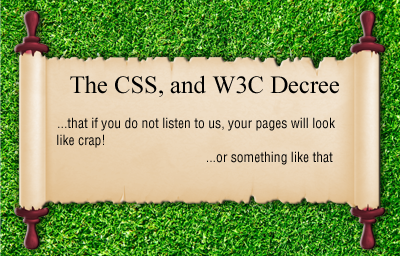
<style>
.page{position:relative;width:400px;height:256px}
.page>*{position:absolute;margin:0}
.t1{font:24.6px "TimesNewRomanPSMT";color:#000000}
.t2{font:13.6px "HelveticaLTStd-Cond";color:#000000}
</style>
<div class="page">
<p class="t1" style="left:70px;top:75px;width:269px;height:22px">The CSS, and W3C Decree</p>
<p class="t2" style="left:58px;top:117px;width:277px;height:14px">...that if you do not listen to us, your pages will look</p>
<p class="t2" style="left:57px;top:134px;width:47px;height:14px">like crap!</p>
<p class="t2" style="left:207px;top:151px;width:126px;height:14px">...or something like that</p>
</div>
